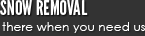
<style>
.page{position:relative;width:145px;height:36px;background:#333333}
.page>*{position:absolute;margin:0}
.t1{font:20px "LeagueGothic";letter-spacing:0.01em;color:#ffffff}
.t2{font:12px "CenturyGothic";letter-spacing:0.01em;color:#ffffff}
</style>
<div class="page">
<p class="t1" style="left:0px;top:0px;width:88px;height:15px">SNOW REMOVAL</p>
<p class="t2" style="left:2px;top:22px;width:143px;height:11px">there when you need us</p>
</div>
